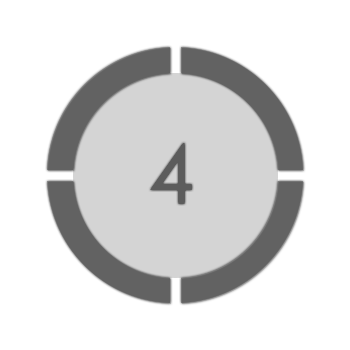
<style>
.page{position:relative;width:350px;height:350px;background:#ffffff}
.page>*{position:absolute;margin:0}
.t1{font:82.4px "CenturyGothic";color:#5c5c5c}
</style>
<div class="page">
<p class="t1" style="left:150px;top:143px;width:42px;height:61px">4</p>
</div>
